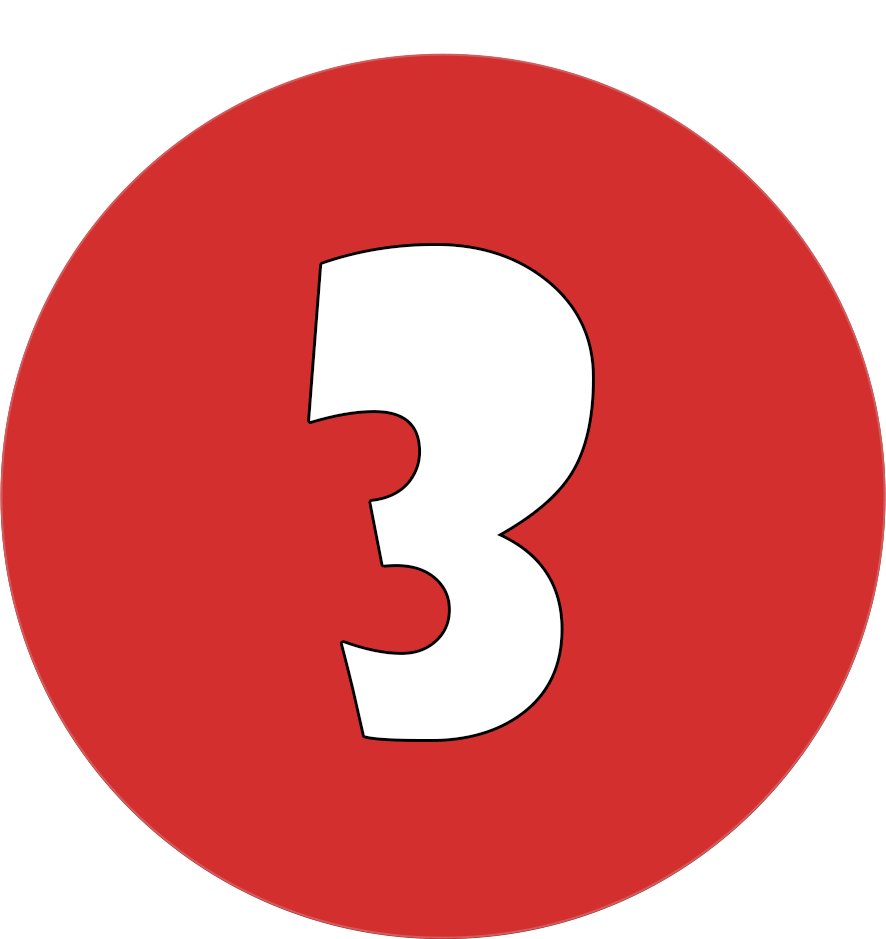
<style>
.page{position:relative;width:886px;height:939px;background:#d32f2f}
.page>*{position:absolute;margin:0}
.t1{font:637.2px "ShowcardGothic-Reg";color:#ffffff}
</style>
<div class="page">
<p class="t1" style="left:310px;top:246px;width:282px;height:493px">3</p>
</div>
